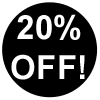
<style>
.page{position:relative;width:100px;height:100px;background:#000000}
.page>*{position:absolute;margin:0}
.t1{font:33.3px "Arial-BoldMT";color:#ffffff}
</style>
<div class="page">
<p class="t1" style="left:11px;top:14px;width:74px;height:66px;text-align:center">20%<br>OFF!</p>
</div>
